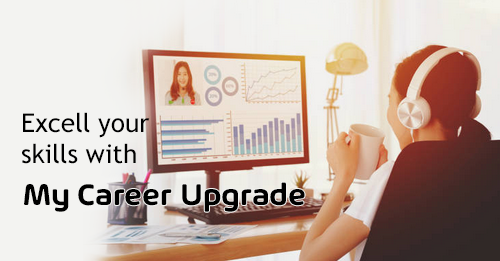
<style>
.page{position:relative;width:500px;height:261px;background:#f3f3f1}
.page>*{position:absolute;margin:0}
.t1{font:26px "TrebuchetMS";color:#000000}
.t2{font:32px "Arlon-SemiBold";color:#000000}
</style>
<div class="page">
<p class="t1" style="left:22px;top:112px;width:128px;height:52px">Excell your<br>skills with</p>
<p class="t2" style="left:24px;top:182px;width:281px;height:30px">My Career Upgrade</p>
</div>
